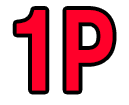
<style>
.page{position:relative;width:129px;height:105px;background:#ffffff}
.page>*{position:absolute;margin:0}
.t1{font:100px "HGPSoeiKakugothicUB";letter-spacing:-0.05em;color:#ff002a}
</style>
<div class="page">
<p class="t1" style="left:16px;top:10px;width:97px;height:81px">1P</p>
</div>
